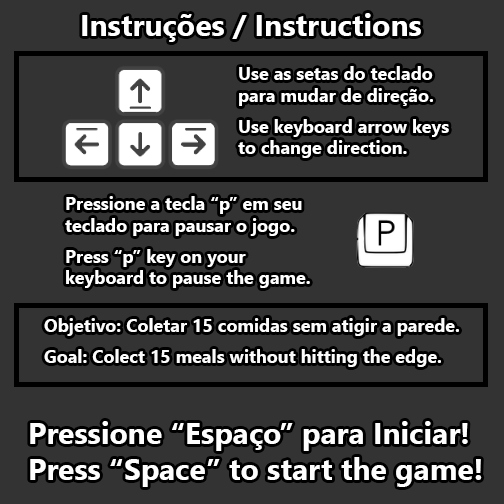
<style>
.page{position:relative;width:504px;height:504px;background:#333333}
.page>*{position:absolute;margin:0}
.t1{font:30px "SegoeUI-Bold";color:#ffffff}
.t2{font:18px "SegoeUI-Bold";color:#ffffff}
.t3{font:18px "SegoeUI-Bold";color:#fcfcfc}
.t4{font:30px "SegoeUI-Bold";color:#fefefe}
</style>
<div class="page">
<p class="t1" style="left:82px;top:13px;width:339px;height:29px">Instruções / Instructions</p>
<p class="t2" style="left:238px;top:66px;width:211px;height:92px">Use as setas do teclado <br>para mudar de direção.<br><br>Use keyboard arrow keys <br>to change direction.</p>
<p class="t2" style="left:65px;top:196px;width:245px;height:92px">Pressione a tecla “p” em seu <br>teclado para pausar o jogo.<br><br>Press “p” key on your <br>keyboard to pause the game.</p>
<p class="t3" style="left:44px;top:318px;width:415px;height:49px">Objetivo: Coletar 15 comidas sem atigir a parede. <br><br>Goal: Colect 15 meals without hitting the edge.</p>
<p class="t4" style="left:30px;top:421px;width:452px;height:66px">Pressione “Espaço” para Iniciar!<br>Press “Space” to start the game!</p>
</div>
